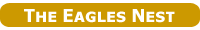
<style>
.page{position:relative;width:200px;height:30px;background:#cc9900}
.page>*{position:absolute;margin:0}
.t1{font:17.9px "TahomaSmallCap-Bold";color:#ffffff}
</style>
<div class="page">
<p class="t1" style="left:24px;top:9px;width:151px;height:14px">The Eagles Nest</p>
</div>
